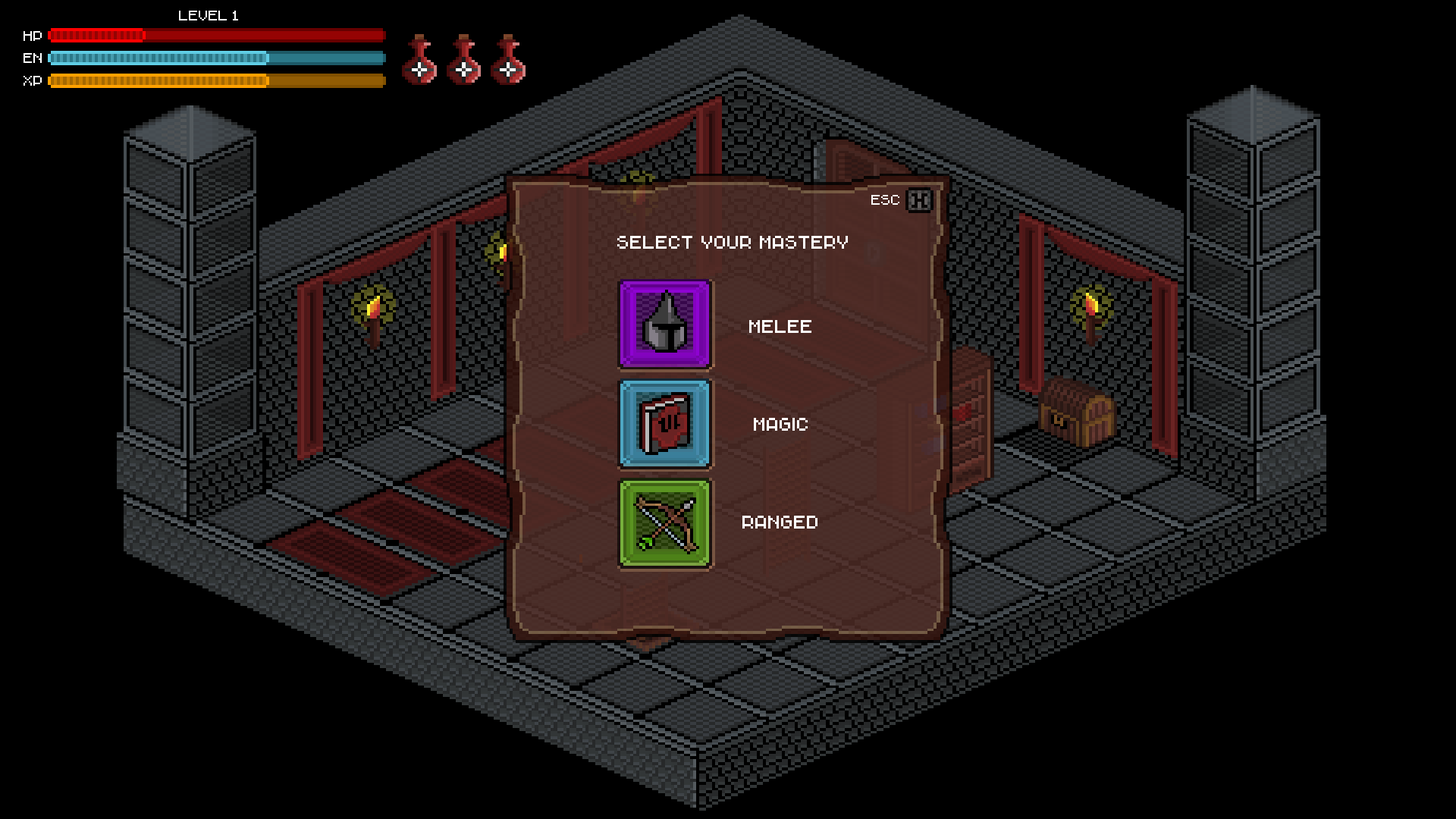
<style>
.page{position:relative;width:1456px;height:819px;background:#000000}
.page>*{position:absolute;margin:0}
.t1{font:13.6px "Chava-Regular";color:#ffffff}
.t2{font:18.2px "Chava-Regular";color:#ffffff}
</style>
<div class="page">
<p class="t1" style="left:179px;top:11px;width:59px;height:9px">LEVEL 1</p>
<p class="t1" style="left:24px;top:31px;width:18px;height:10px">HP</p>
<p class="t1" style="left:24px;top:53px;width:18px;height:10px">EN</p>
<p class="t1" style="left:24px;top:76px;width:18px;height:10px">XP</p>
<p class="t1" style="left:871px;top:195px;width:28px;height:10px">ESC</p>
<p class="t2" style="left:617px;top:236px;width:231px;height:13px">SELECT YOUR MASTERY</p>
<p class="t2" style="left:749px;top:320px;width:62px;height:13px">MELEE</p>
<p class="t2" style="left:754px;top:418px;width:54px;height:13px">MAGIC</p>
<p class="t2" style="left:742px;top:516px;width:75px;height:13px">RANGED</p>
</div>
